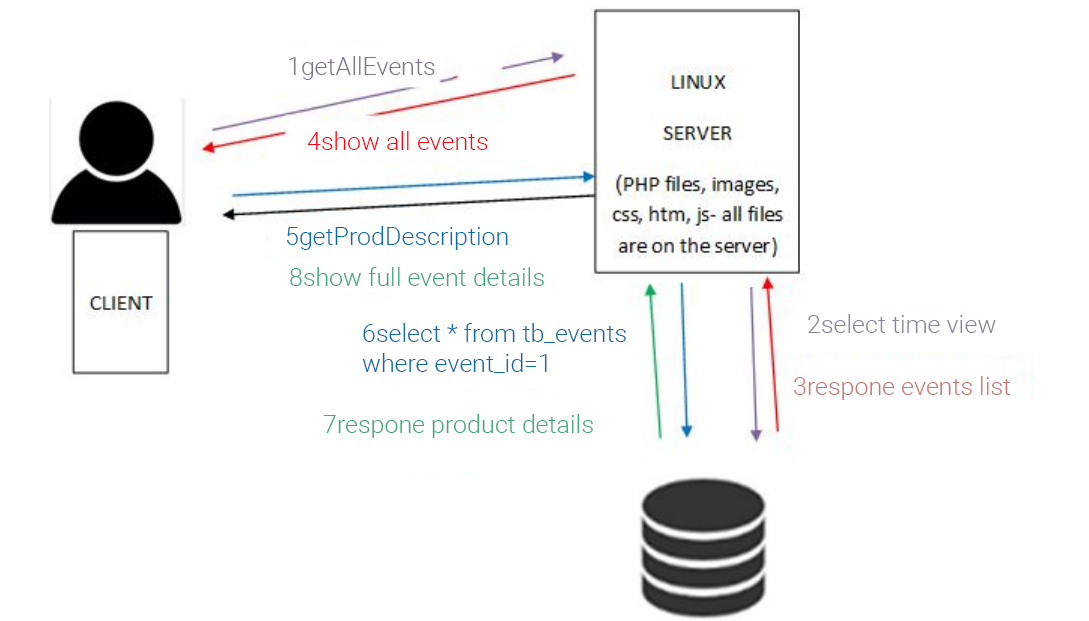
<style>
.page{position:relative;width:1089px;height:621px;background:#ffffff}
.page>*{position:absolute;margin:0}
.t1{font:25px "Roboto-Light";color:#7e7586}
.t2{font:25px "Roboto-Light";color:#f50a13}
.t3{font:25px "Roboto-Light";color:#0a6caa}
.t4{font:25px "Roboto-Light";color:#42a77b}
.t5{font:25px "Roboto-Light";color:#8c8498}
.t6{font:25px "Roboto-Light";color:#0f69a4}
.t7{font:25px "Roboto-Light";color:#c87672}
</style>
<div class="page">
<p class="t1" style="left:289px;top:56px;width:146px;height:24px">1getAllEvents</p>
<p class="t2" style="left:307px;top:131px;width:181px;height:19px">4show all events</p>
<p class="t3" style="left:287px;top:226px;width:221px;height:24px">5getProdDescription</p>
<p class="t4" style="left:290px;top:267px;width:254px;height:19px">8show full event details</p>
<p class="t5" style="left:808px;top:314px;width:188px;height:19px">2select time view</p>
<p class="t6" style="left:362px;top:323px;width:264px;height:50px;text-align:right">6select * from tb_events<br>where event_id=1</p>
<p class="t7" style="left:794px;top:376px;width:217px;height:24px">3respone events list</p>
<p class="t4" style="left:323px;top:414px;width:270px;height:24px">7respone product details</p>
</div>
